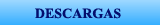
<style>
.page{position:relative;width:160px;height:25px}
.page>*{position:absolute;margin:0}
.t1{font:14px "TimesNewRomanPS-BoldMT";color:#040f6e}
</style>
<div class="page">
<p class="t1" style="left:35px;top:8px;width:86px;height:11px">DESCARGAS</p>
</div>
